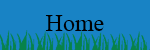
<style>
.page{position:relative;width:150px;height:50px;background:#1883c5}
.page>*{position:absolute;margin:0}
.t1{font:24px "TimesNewRomanPSMT";color:#000000}
</style>
<div class="page">
<p class="t1" style="left:45px;top:15px;width:59px;height:16px">Home</p>
</div>
